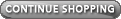
<style>
.page{position:relative;width:121px;height:19px}
.page>*{position:absolute;margin:0}
.t1{font:10px "MyriadWebPro";letter-spacing:0.06em;color:#ffffff;font-weight:bold}
</style>
<div class="page">
<p class="t1" style="left:5px;top:5px;width:109px;height:8px">CONTINUE SHOPPING</p>
</div>
